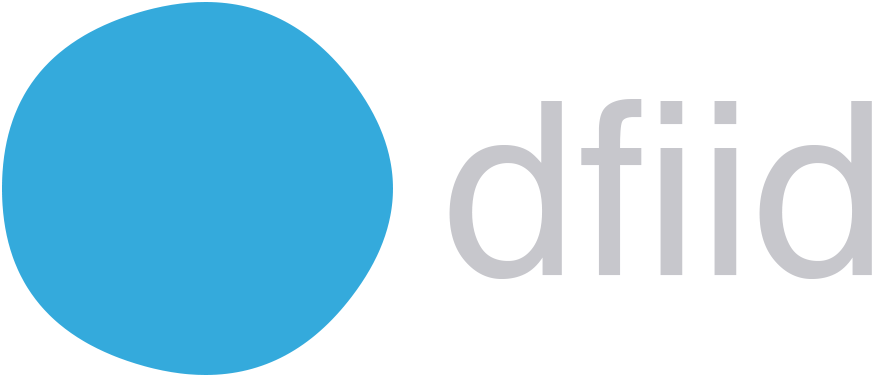
<style>
.page{position:relative;width:874px;height:377px;background:#ffffff}
.page>*{position:absolute;margin:0}
.t1{font:242px "Helvetica";color:#c7c7cc}
</style>
<div class="page">
<p class="t1" style="left:449px;top:99px;width:423px;height:180px">dfiid</p>
</div>
